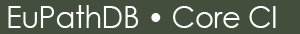
<style>
.page{position:relative;width:300px;height:34px;background:#434e3c}
.page>*{position:absolute;margin:0}
.t1{font:30px "CenturyGothic";letter-spacing:-0.02em;color:#ffffff}
</style>
<div class="page">
<p class="t1" style="left:8px;top:5px;width:268px;height:23px">EuPathDB • Core CI</p>
</div>
